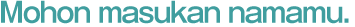
<style>
.page{position:relative;width:355px;height:27px;background:#ffffff}
.page>*{position:absolute;margin:0}
.t1{font:28px "GothicMB101Pro-DeBold";letter-spacing:-0.05em;color:#409e9f;scale:0.95 1}
</style>
<div class="page">
<p class="t1" style="left:1px;top:0px;width:348px;height:24px">Mohon masukan namamu.</p>
</div>
